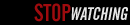
<style>
.page{position:relative;width:130px;height:25px;background:#000000}
.page>*{position:absolute;margin:0}
.t1{font:24px "AlternateGothicNo2BT-Regular";color:#9e0b0e;text-transform:uppercase}
.t2{font:18px "AlternateGothicNo2BT-Regular";color:#e5e5e5;text-transform:uppercase;font-style:italic}
</style>
<div class="page">
<p class="t1" style="left:34px;top:3px;width:37px;height:19px">stop</p>
<p class="t2" style="left:71px;top:7px;width:57px;height:13px">watching</p>
</div>
